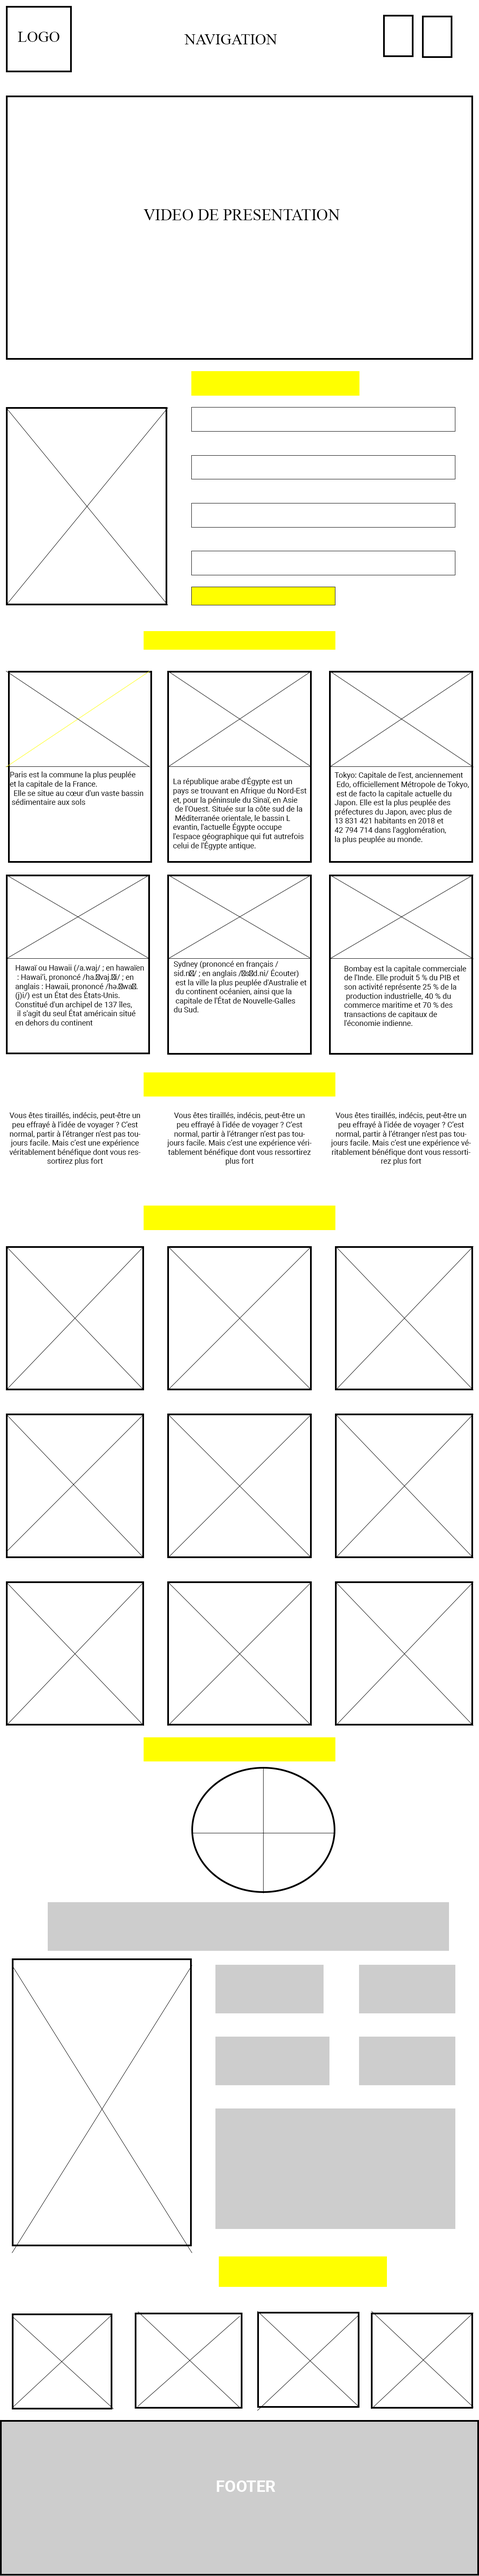
<style>
.page{position:relative;width:479px;height:2576px;background:#ffffff}
.page>*{position:absolute;margin:0}
.t1{font:15.2px "TimesNewRomanPSMT";color:#000000}
.t2{font:16.1px "TimesNewRomanPSMT";color:#000000}
.t3{font:7.6px "Roboto-Regular";color:#020202}
.t4{font:7.6px "MyriadPro-Regular";color:#020202}
.t5{font:16.1px "Roboto-Bold";color:#ffffff}
</style>
<div class="page">
<p class="t1" style="left:18px;top:32px;width:42px;height:10px">LOGO</p>
<p class="t1" style="left:184px;top:34px;width:93px;height:11px">NAVIGATION</p>
<p class="t2" style="left:144px;top:209px;width:196px;height:12px">VIDEO DE PRESENTATION</p>
<p class="t3" style="left:10px;top:771px;width:133px;height:34px">Paris est la commune la plus peuplée <br>et la capitale de la France.<br>  Elle se situe au cœur d'un vaste bassin<br> sédimentaire aux sols</p>
<p class="t3" style="left:335px;top:772px;width:134px;height:72px">Tokyo: Capitale de l'est, anciennement<br> Edo, officiellement Métropole de Tokyo,<br> est de facto la capitale actuelle du <br>Japon. Elle est la plus peuplée des <br>préfectures du Japon, avec plus de <br>13 831 421 habitants en 2018 et <br>42 794 714 dans l'agglomération, <br>la plus peuplée au monde.</p>
<p class="t3" style="left:173px;top:777px;width:134px;height:73px">La république arabe d'Égypte est un <br>pays se trouvant en Afrique du Nord-Est <br>et, pour la péninsule du Sinaï, en Asie<br> de l'Ouest. Située sur la côte sud de la<br> Méditerranée orientale, le bassin L<br>evantin, l'actuelle Égypte occupe <br>l'espace géographique qui fut autrefois <br>celui de l'Égypte antique.</p>
<p class="t3" style="left:15px;top:965px;width:129px;height:60px">Hawaï ou Hawaii (/a.waj/ ; en hawaïen<br> : Hawai‘i, prononcé /ha.<span class="t4">ˈ</span>vaj.<span class="t4">ʔ</span>i/ ; en <br>anglais : Hawaii, prononcé /hə.<span class="t4">ˈ</span>wa<span class="t4">ɪ</span>.<br>(j)i/) est un État des États-Unis. <br>Constitué d'un archipel de 137 îles,<br> il s'agit du seul État américain situé <br>en dehors du continent</p>
<p class="t3" style="left:174px;top:961px;width:133px;height:51px">Sydney (prononcé en français /<br>sid.n<span class="t4">ɛ</span>/ ; en anglais /<span class="t4">ˈ</span>s<span class="t4">ɪ</span>d.ni/ Écouter)<br> est la ville la plus peuplée d'Australie et<br> du continent océanien, ainsi que la<br> capitale de l'État de Nouvelle-Galles <br>du Sud.</p>
<p class="t3" style="left:344px;top:965px;width:123px;height:61px">Bombay est la capitale commerciale <br>de l'Inde. Elle produit 5 % du PIB et <br>son activité représente 25 % de la<br> production industrielle, 40 % du <br>commerce maritime et 70 % des <br>transactions de capitaux de <br>l'économie indienne.</p>
<p class="t3" style="left:9px;top:1112px;width:132px;height:53px;text-align:center">Vous êtes tiraillés, indécis, peut-être un peu effrayé à l’idée de voyager ? C’est normal, partir à l’étranger n’est pas toujours facile. Mais c’est une expérience véritablement bénéfique dont vous ressortirez plus fort</p>
<p class="t3" style="left:167px;top:1112px;width:145px;height:53px;text-align:center">Vous êtes tiraillés, indécis, peut-être un peu effrayé à l’idée de voyager ? C’est normal, partir à l’étranger n’est pas toujours facile. Mais c’est une expérience véritablement bénéfique dont vous ressortirez plus fort</p>
<p class="t3" style="left:331px;top:1112px;width:140px;height:53px;text-align:center">Vous êtes tiraillés, indécis, peut-être un peu effrayé à l’idée de voyager ? C’est normal, partir à l’étranger n’est pas toujours facile. Mais c’est une expérience véritablement bénéfique dont vous ressortirez plus fort</p>
<p class="t5" style="left:217px;top:2480px;width:59px;height:12px">FOOTER</p>
</div>
